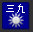
<style>
.page{position:relative;width:33px;height:32px;background:#000090}
.page>*{position:absolute;margin:0}
.t1{font:10.4px "SimSun";color:#ffffff}
</style>
<div class="page">
<p class="t1" style="left:6px;top:4px;width:19px;height:9px">三九</p>
</div>
